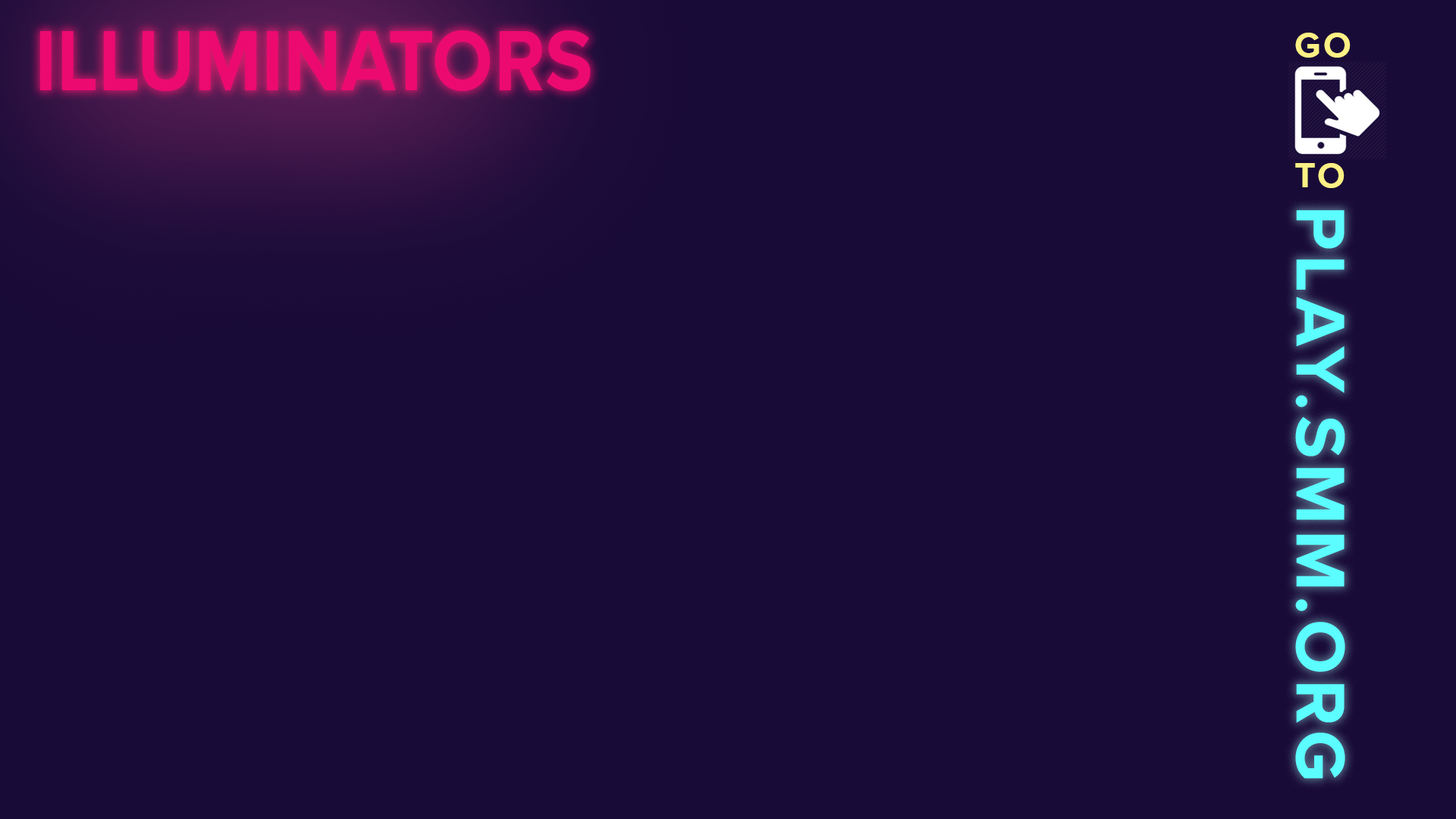
<style>
.page{position:relative;width:1456px;height:819px;background:#190b38}
.page>*{position:absolute;margin:0}
.t1{font:89.1px "ProximaNova-Bold";letter-spacing:0.005em;color:#ec0a70;scale:0.89 1}
.t2{font:89.1px "ProximaNova-Bold";letter-spacing:-0.01em;color:#ec0a70;scale:0.89 1}
.t3{font:89.1px "ProximaNova-Bold";letter-spacing:-0.025em;color:#ec0a70;scale:0.89 1}
.t4{font:89.1px "ProximaNova-Bold";letter-spacing:-0.005em;color:#ec0a70;scale:0.89 1}
.t5{font:89.1px "ProximaNova-Bold";letter-spacing:0.025em;color:#ec0a70;scale:0.89 1}
.t6{font:36.3px "ProximaNova-Bold";letter-spacing:0.075em;color:#fdf085}
.t7{font:71.3px "ProximaNova-Bold";letter-spacing:0.075em;color:#5bfdfe}
.t8{font:45px "ProximaNova-Bold";letter-spacing:0.075em;color:#fdf085}
</style>
<div class="page">
<p class="t1" style="left:39px;top:30px;width:552px;height:61px">IL<span class="t2">LU</span>MIN<span class="t3">A</span><span class="t4">T</span><span class="t5">O</span>RS</p>
<p class="t6" style="left:1295px;top:33px;width:56px;height:155px">GO<br><br><br>TO</p>
<p class="t7" style="left:1295px;top:210px;width:50px;height:569px;rotate:90deg"><span class="t8"><br></span>PLAY.SMM.ORG</p>
</div>
